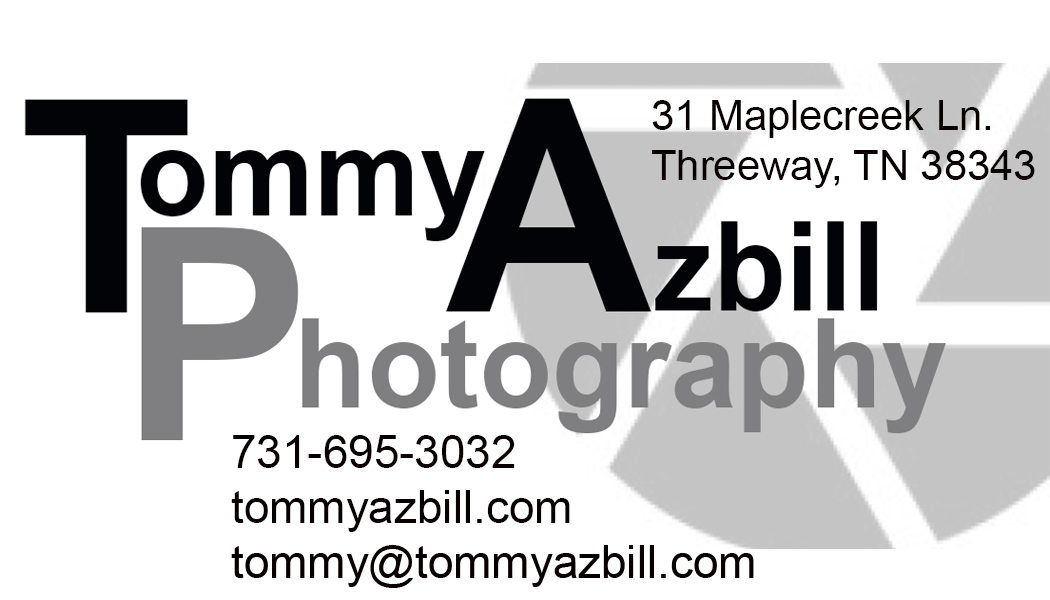
<style>
.page{position:relative;width:1050px;height:600px;background:#ffffff}
.page>*{position:absolute;margin:0}
.t1{font:41.7px "ArialMT";color:#080000}
.t2{font:45.8px "ArialMT";color:#080000}
</style>
<div class="page">
<p class="t1" style="left:652px;top:100px;width:383px;height:88px">31 Maplecreek Ln.<br>Threeway, TN 38343</p>
<p class="t2" style="left:231px;top:435px;width:523px;height:153px">731-695-3032<br>tommyazbill.com<br>tommy@tommyazbill.com</p>
</div>
